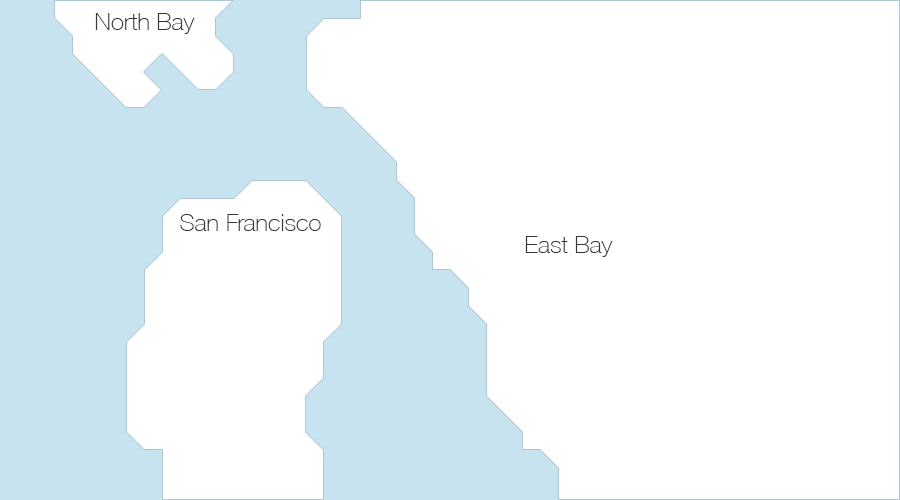
<style>
.page{position:relative;width:900px;height:500px;background:#ffffff}
.page>*{position:absolute;margin:0}
.t1{font:24px "HelveticaNeue-Thin";color:#363636}
</style>
<div class="page">
<p class="t1" style="left:95px;top:13px;width:100px;height:21px">North Bay</p>
<p class="t1" style="left:180px;top:214px;width:141px;height:17px">San Francisco</p>
<p class="t1" style="left:525px;top:236px;width:88px;height:21px">East Bay</p>
</div>
